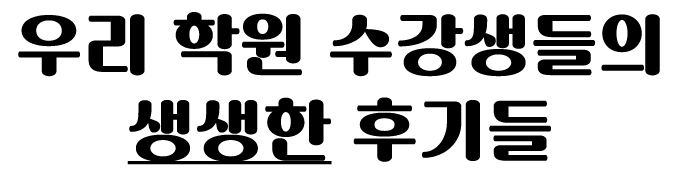
<style>
.page{position:relative;width:680px;height:176px;background:#ffffff}
.page>*{position:absolute;margin:0}
.t1{font:66px/85.7px "SANGJU-Gotgam";color:#000000;font-weight:bold}
.t2{font:66px/85.7px "SANGJU-Gotgam";color:#000000;font-weight:bold;text-decoration:underline}
</style>
<div class="page">
<p class="t1" style="left:18px;top:12px;width:642px;height:153px;text-align:center">우리 학원 수강생들의<br><span class="t2">생생한</span> 후기들</p>
</div>
